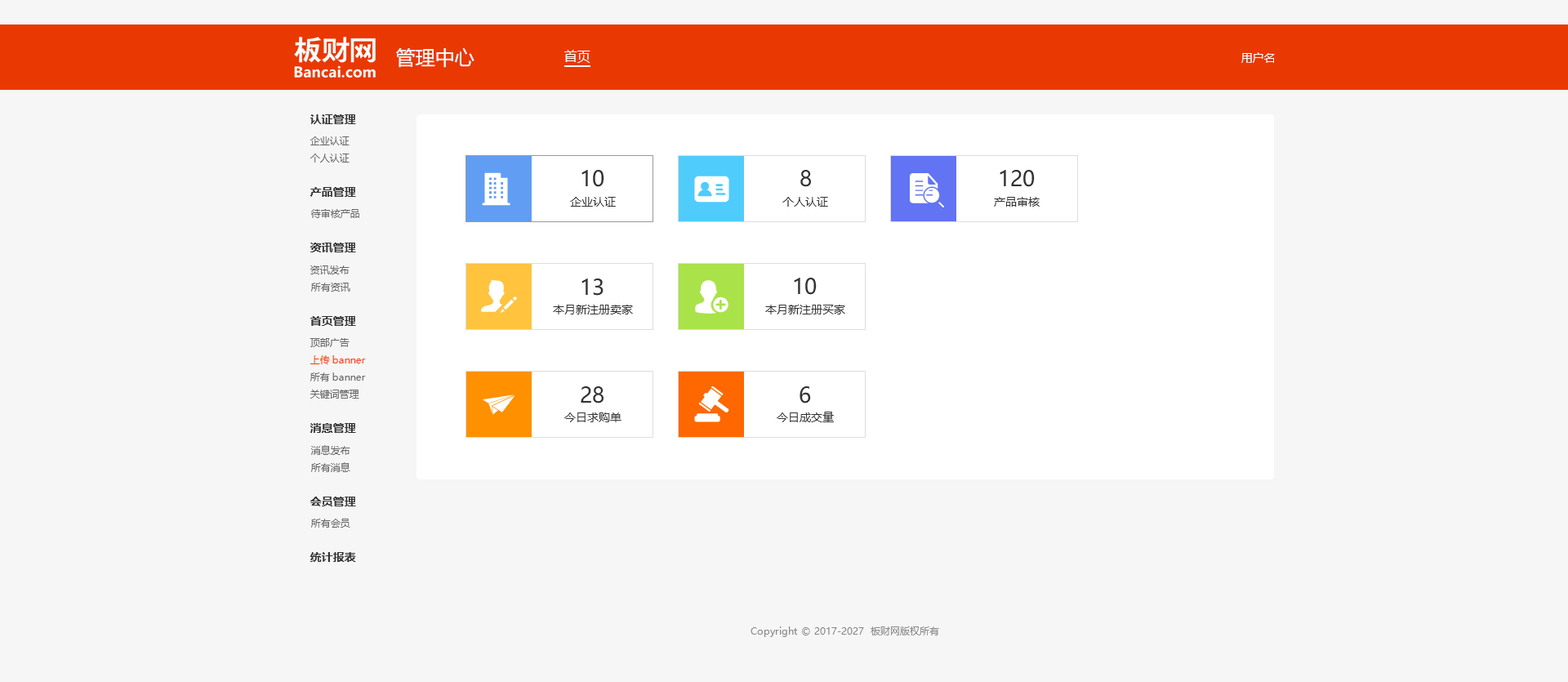
<style>
.page{position:relative;width:1568px;height:682px;background:#f6f6f6}
.page>*{position:absolute;margin:0}
.t1{font:19.6px "MicrosoftYaHei";color:#ffffff}
.t2{font:13.1px "MicrosoftYaHei";color:#ffffff}
.t3{font:11.4px "MicrosoftYaHei";color:#ffffff}
.t4{font:11.4px "MicrosoftYaHei-Bold";color:#333333}
.t5{font:9.8px "MicrosoftYaHei";color:#666666}
.t6{font:21.2px "MicrosoftYaHei";color:#333333}
.t7{font:11.4px "MicrosoftYaHei";color:#333333}
.t8{font:9.8px "MicrosoftYaHei";color:#ff3c00}
.t9{font:9.8px "MicrosoftYaHei";color:#888888}
</style>
<div class="page">
<p class="t1" style="left:396px;top:48px;width:78px;height:20px">管理中心</p>
<p class="t2" style="left:564px;top:50px;width:26px;height:13px">首页</p>
<p class="t3" style="left:1241px;top:52px;width:34px;height:11px">用户名</p>
<p class="t4" style="left:310px;top:114px;width:46px;height:10px">认证管理</p>
<p class="t5" style="left:310px;top:136px;width:40px;height:9px">企业认证</p>
<p class="t5" style="left:310px;top:154px;width:40px;height:9px">个人认证</p>
<p class="t6" style="left:581px;top:170px;width:23px;height:17px">10</p>
<p class="t6" style="left:800px;top:170px;width:11px;height:17px">8</p>
<p class="t6" style="left:1000px;top:170px;width:35px;height:17px">120</p>
<p class="t4" style="left:310px;top:187px;width:46px;height:10px">产品管理</p>
<p class="t7" style="left:570px;top:197px;width:46px;height:10px">企业认证</p>
<p class="t7" style="left:782px;top:197px;width:46px;height:10px">个人认证</p>
<p class="t7" style="left:994px;top:197px;width:46px;height:10px">产品审核</p>
<p class="t5" style="left:311px;top:209px;width:48px;height:9px">待审核产品</p>
<p class="t4" style="left:310px;top:243px;width:46px;height:9px">资讯管理</p>
<p class="t5" style="left:310px;top:265px;width:40px;height:9px">资讯发布</p>
<p class="t6" style="left:581px;top:278px;width:23px;height:18px">13</p>
<p class="t6" style="left:794px;top:278px;width:23px;height:17px">10</p>
<p class="t5" style="left:311px;top:283px;width:39px;height:9px">所有资讯</p>
<p class="t7" style="left:553px;top:305px;width:80px;height:9px">本月新注册卖家</p>
<p class="t7" style="left:765px;top:305px;width:80px;height:9px">本月新注册买家</p>
<p class="t4" style="left:310px;top:316px;width:46px;height:10px">首页管理</p>
<p class="t5" style="left:310px;top:338px;width:40px;height:9px">顶部广告</p>
<p class="t8" style="left:310px;top:355px;width:56px;height:9px">上传banner</p>
<p class="t5" style="left:310px;top:372px;width:56px;height:9px">所有banner</p>
<p class="t5" style="left:310px;top:390px;width:49px;height:9px">关键词管理</p>
<p class="t6" style="left:581px;top:386px;width:23px;height:17px">28</p>
<p class="t6" style="left:800px;top:386px;width:11px;height:17px">6</p>
<p class="t7" style="left:564px;top:412px;width:57px;height:10px">今日求购单</p>
<p class="t7" style="left:777px;top:412px;width:57px;height:10px">今日成交量</p>
<p class="t4" style="left:310px;top:423px;width:46px;height:10px">消息管理</p>
<p class="t5" style="left:311px;top:445px;width:39px;height:10px">消息发布</p>
<p class="t5" style="left:311px;top:462px;width:39px;height:10px">所有消息</p>
<p class="t4" style="left:310px;top:497px;width:46px;height:9px">会员管理</p>
<p class="t5" style="left:311px;top:519px;width:39px;height:9px">所有会员</p>
<p class="t4" style="left:310px;top:552px;width:46px;height:10px">统计报表</p>
<p class="t9" style="left:751px;top:626px;width:188px;height:11px">Copyright © 2017-2027  板财网版权所有</p>
</div>
